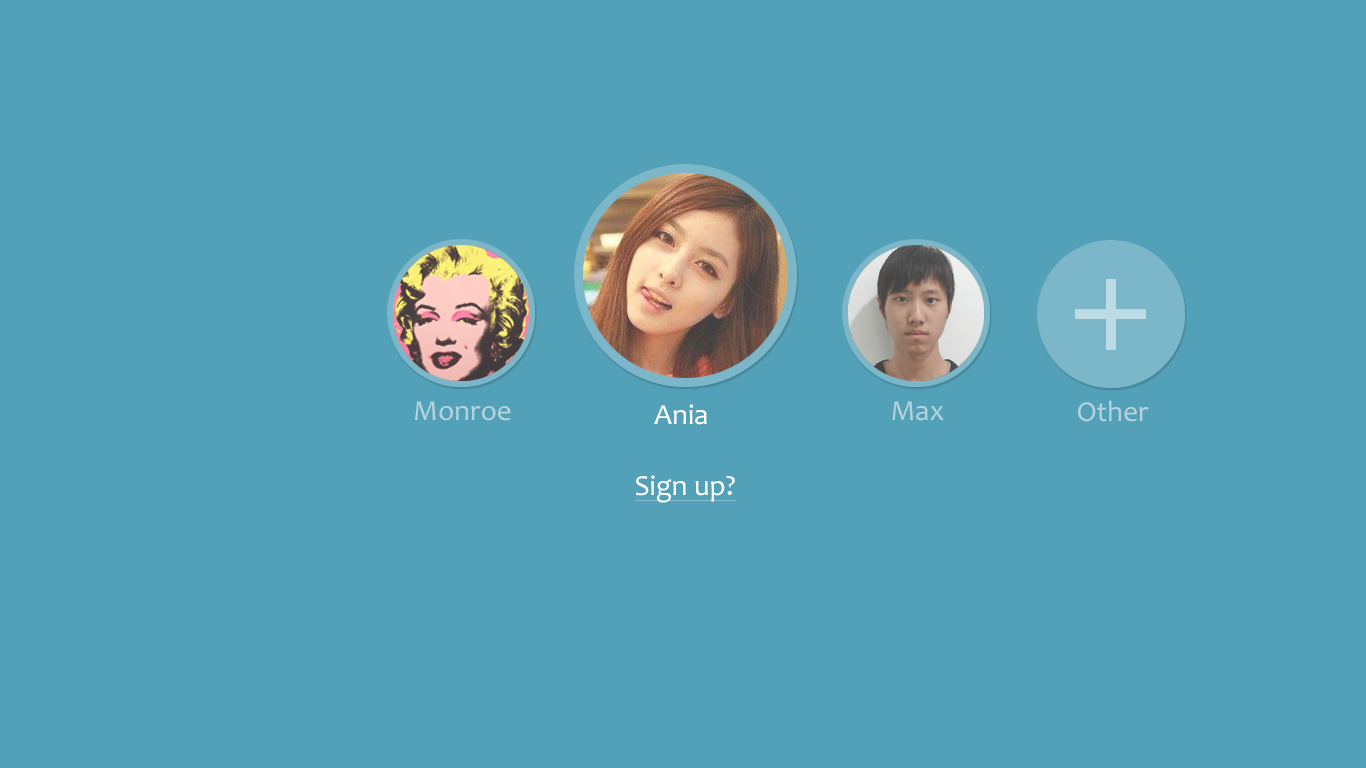
<style>
.page{position:relative;width:1366px;height:768px;background:#53a1b8}
.page>*{position:absolute;margin:0}
.t1{font:29.2px "Candara";color:#b6d3dd}
.t2{font:29.2px "Candara";color:#ffffff}
.t3{font:29.2px "Candara";color:#ffffff;text-decoration:underline}
</style>
<div class="page">
<p class="t1" style="left:415px;top:401px;width:96px;height:20px">Monroe</p>
<p class="t1" style="left:892px;top:401px;width:52px;height:20px">Max</p>
<p class="t1" style="left:1078px;top:400px;width:71px;height:22px">Other</p>
<p class="t2" style="left:654px;top:404px;width:53px;height:21px">Ania</p>
<p class="t3" style="left:634px;top:475px;width:102px;height:28px">Sign up?</p>
</div>
